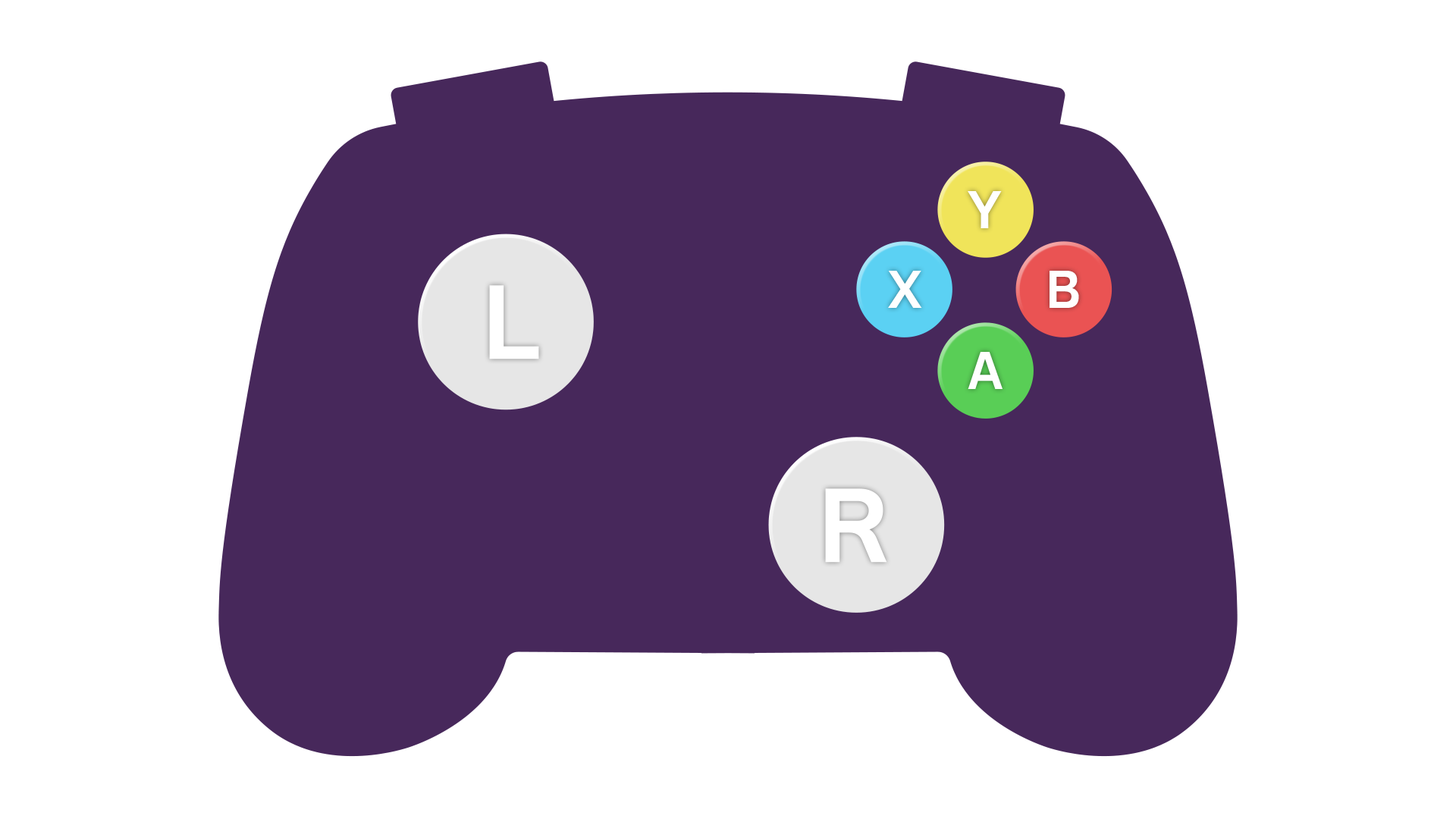
<style>
.page{position:relative;width:1456px;height:819px;background:#ffffff}
.page>*{position:absolute;margin:0}
.t1{font:47px "NitalagoRuika-06";color:#ffffff}
.t2{font:92.5px "NitalagoRuika-06";color:#ffffff}
</style>
<div class="page">
<p class="t1" style="left:968px;top:191px;width:34px;height:37px">Y</p>
<p class="t1" style="left:888px;top:271px;width:34px;height:37px">X</p>
<p class="t1" style="left:1050px;top:271px;width:29px;height:37px">B</p>
<p class="t2" style="left:489px;top:285px;width:50px;height:74px">L</p>
<p class="t1" style="left:968px;top:352px;width:35px;height:37px">A</p>
<p class="t2" style="left:825px;top:488px;width:62px;height:75px">R</p>
</div>
